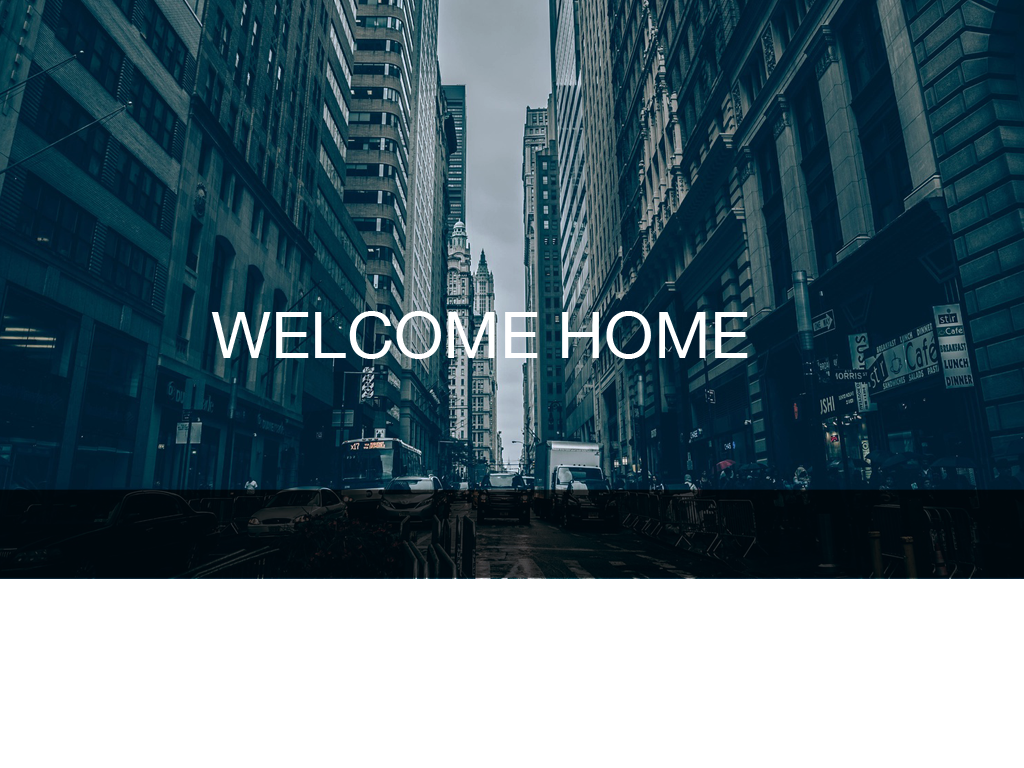
<style>
.page{position:relative;width:1024px;height:768px;background:#ffffff}
.page>*{position:absolute;margin:0}
.t1{font:65px "HelveticaNeue";color:#ffffff}
</style>
<div class="page">
<p class="t1" style="left:211px;top:311px;width:537px;height:48px">WELCOME HOME</p>
</div>
